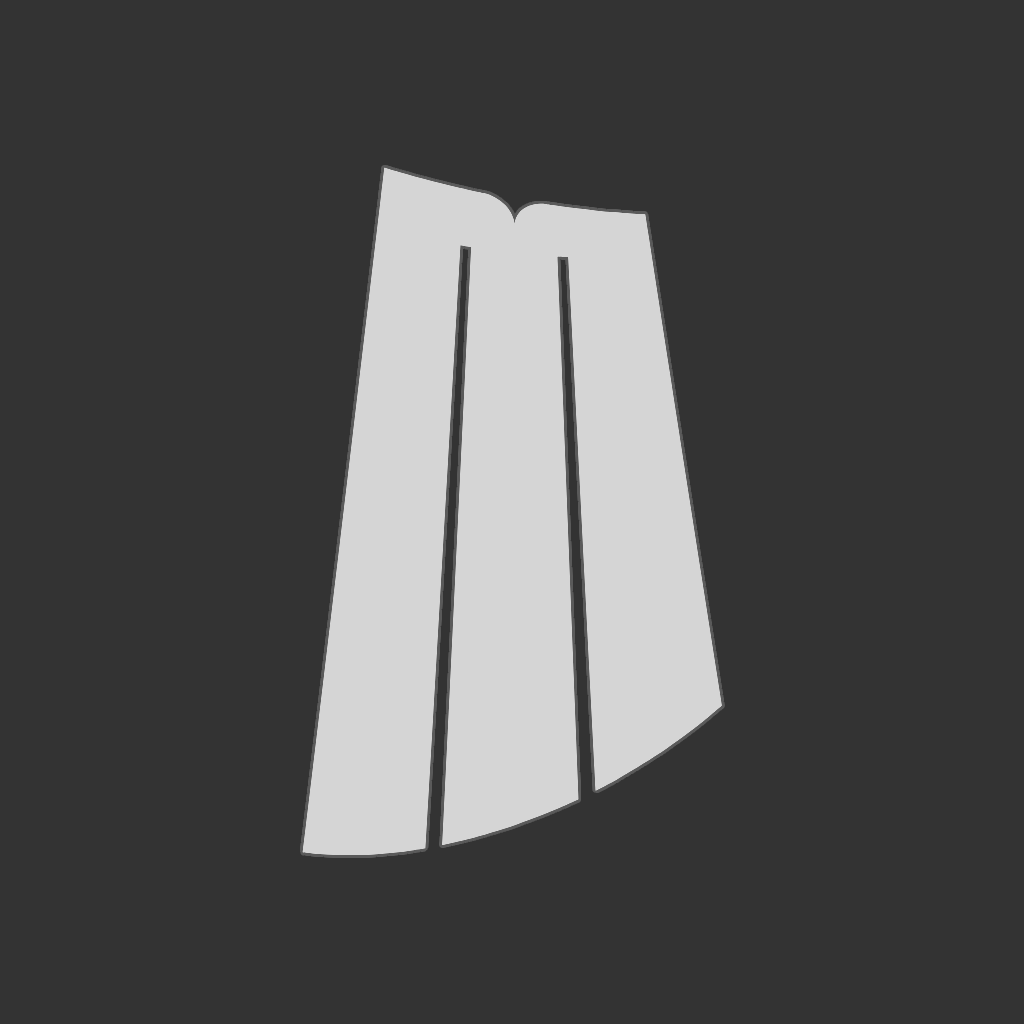
<style>
.page{position:relative;width:1024px;height:1024px;background:#333333}
.page>*{position:absolute;margin:0}
.t1{font:579.9px "Nagasaki";color:#d5d5d5;scale:1.55 1}
</style>
<div class="page">
<p class="t1" style="left:302px;top:167px;width:420px;height:689px">M</p>
</div>
